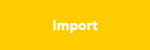
<style>
.page{position:relative;width:150px;height:50px;background:#ffcc00}
.page>*{position:absolute;margin:0}
.t1{font:16px "Calibri-Bold";color:#ffffff}
</style>
<div class="page">
<p class="t1" style="left:53px;top:20px;width:45px;height:13px">Import</p>
</div>
